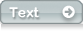
<style>
.page{position:relative;width:83px;height:31px}
.page>*{position:absolute;margin:0}
.t1{font:14px "ArialRoundedMTBold";color:#ffffff}
</style>
<div class="page">
<p class="t1" style="left:9px;top:7px;width:30px;height:11px">Text</p>
</div>
